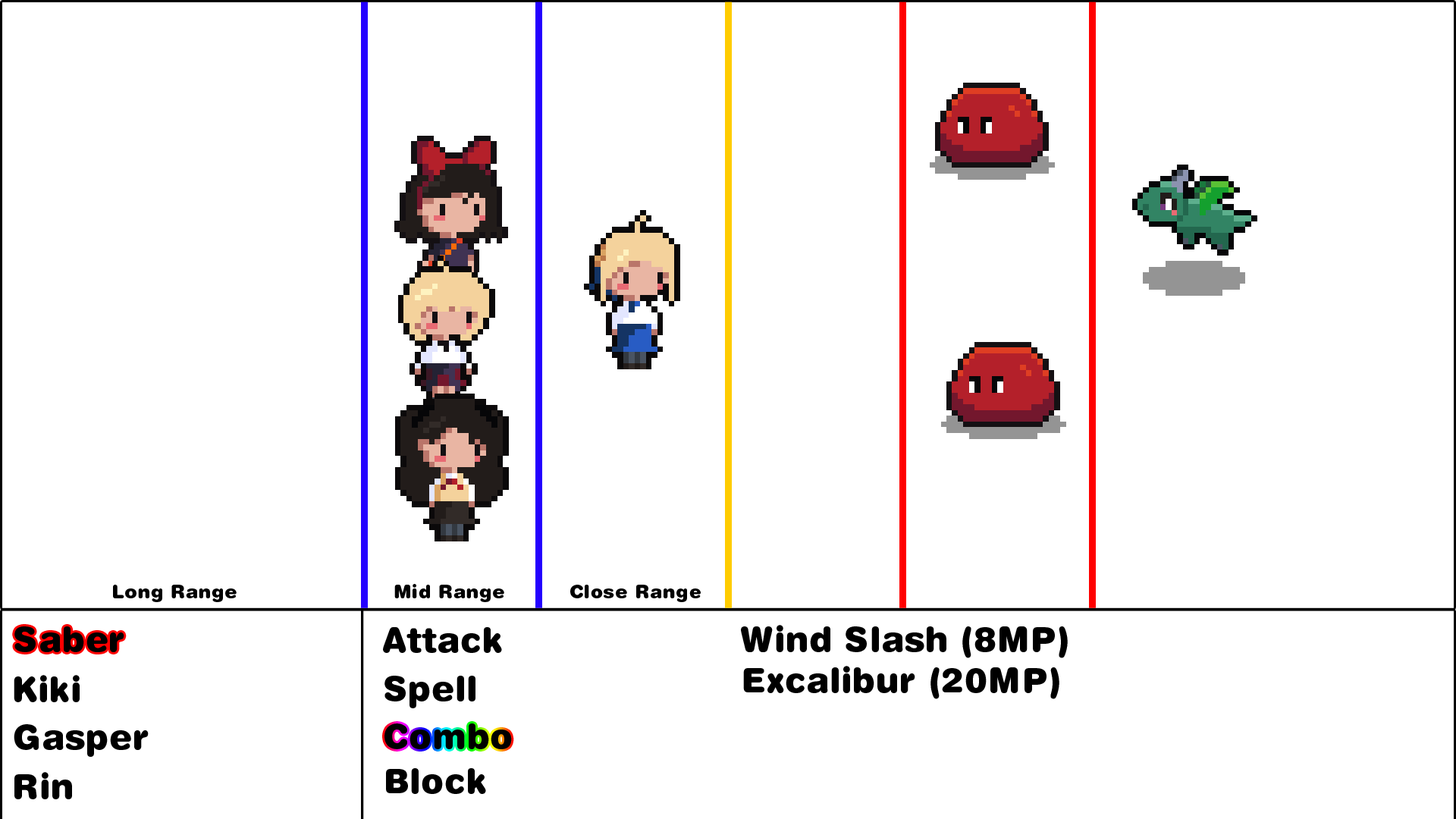
<style>
.page{position:relative;width:1456px;height:819px;background:#ffffff}
.page>*{position:absolute;margin:0}
.t1{font:19px "HelveticaRoundedLTStd-Black";letter-spacing:0.02em;color:#000000}
.t2{font:34.1px "HelveticaRoundedLTStd-Black";letter-spacing:0.02em;color:#000000}
</style>
<div class="page">
<p class="t1" style="left:113px;top:585px;width:124px;height:17px">Long Range</p>
<p class="t1" style="left:394px;top:584px;width:110px;height:18px">Mid Range</p>
<p class="t1" style="left:570px;top:585px;width:131px;height:17px">Close Range</p>
<p class="t2" style="left:14px;top:626px;width:110px;height:26px">Saber</p>
<p class="t2" style="left:383px;top:627px;width:119px;height:26px">Attack</p>
<p class="t2" style="left:741px;top:625px;width:327px;height:33px">Wind Slash (8MP)</p>
<p class="t2" style="left:743px;top:666px;width:316px;height:33px">Excalibur (20MP)</p>
<p class="t2" style="left:14px;top:675px;width:66px;height:27px">Kiki</p>
<p class="t2" style="left:384px;top:676px;width:91px;height:32px">Spell</p>
<p class="t2" style="left:14px;top:724px;width:135px;height:33px">Gasper</p>
<p class="t2" style="left:384px;top:723px;width:128px;height:26px">Combo</p>
<p class="t2" style="left:14px;top:772px;width:58px;height:27px">Rin</p>
<p class="t2" style="left:386px;top:768px;width:100px;height:26px">Block</p>
</div>
